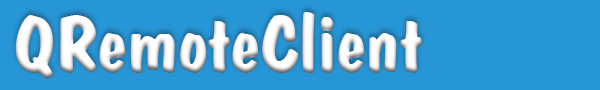
<style>
.page{position:relative;width:600px;height:90px;background:#2796d6}
.page>*{position:absolute;margin:0}
.t1{font:80px "DomBoldBTRusbyme"}
</style>
<div class="page">
<p class="t1" style="left:15px;top:12px;width:407px;height:67px">QRemoteClient</p>
</div>
